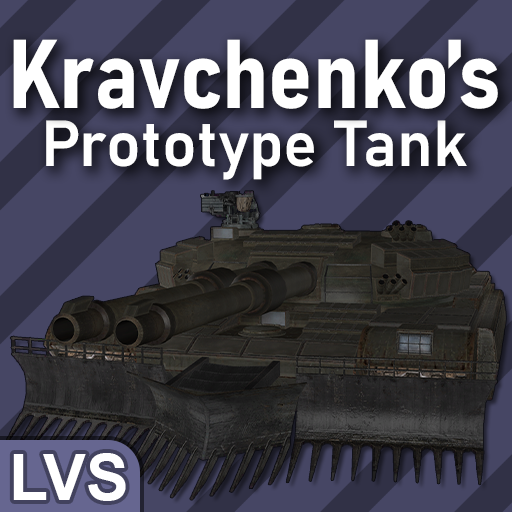
<style>
.page{position:relative;width:512px;height:512px}
.page>*{position:absolute;margin:0}
.t1{font:96px "Bahnschrift-BoldSemiCondensed";color:#ffffff}
.t2{font:64px "Bahnschrift-SemiBold";color:#ffffff}
.t3{font:64px "Arial-BoldMT";color:#ffffff}
</style>
<div class="page">
<p class="t1" style="left:13px;top:39px;width:485px;height:70px">Kravchenko’s</p>
<p class="t2" style="left:46px;top:120px;width:421px;height:60px">Prototype Tank</p>
<p class="t3" style="left:13px;top:453px;width:113px;height:48px">LVS</p>
</div>
